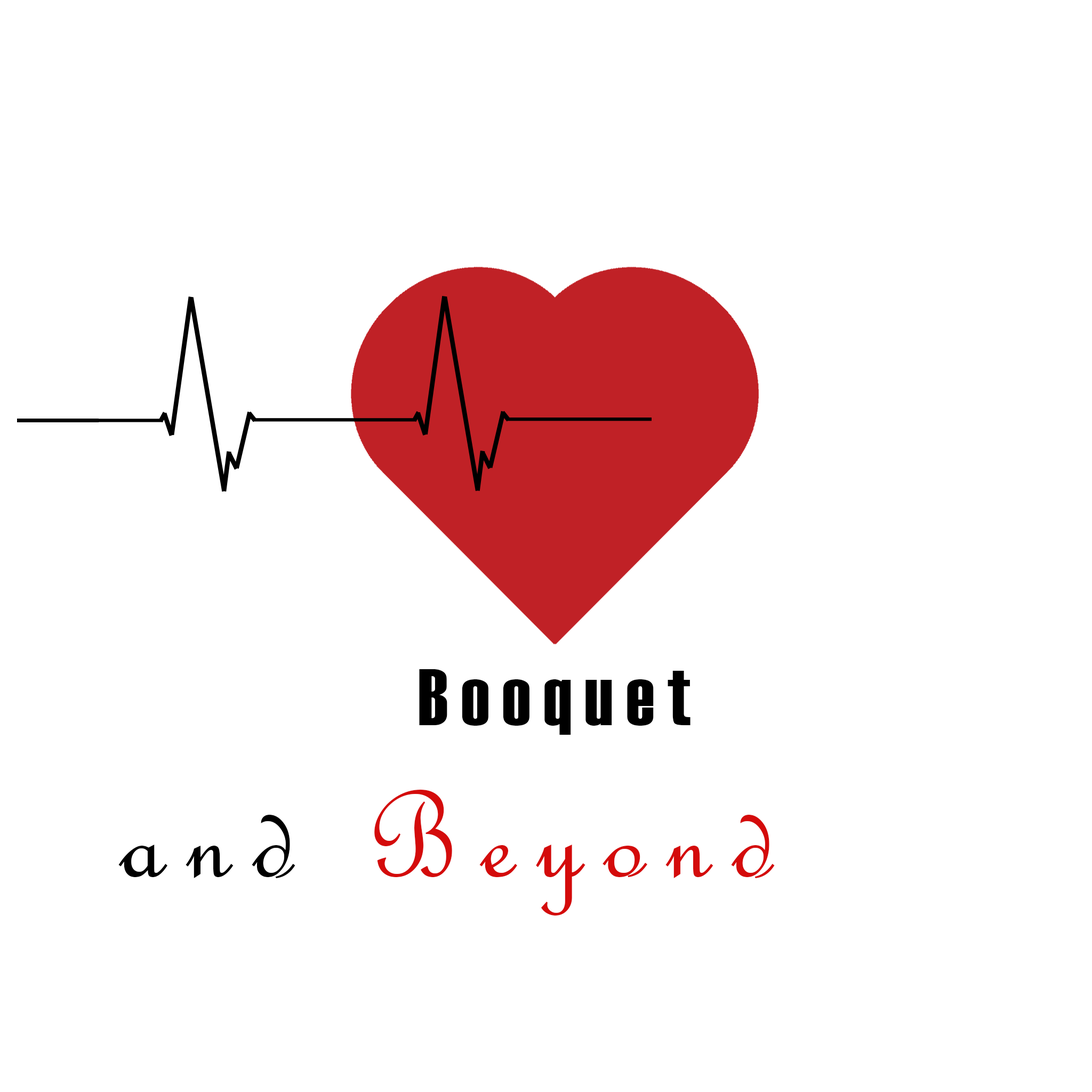
<style>
.page{position:relative;width:1092px;height:1092px;background:#ffffff}
.page>*{position:absolute;margin:0}
.t1{font:80px "Haettenschweiler";letter-spacing:0.16em;color:#000000}
.t2{font:133.3px "FrenchScriptMT";letter-spacing:0.16em;color:#d40b0b}
.t3{font:133.3px "FrenchScriptMT";letter-spacing:0.16em;color:#000000}
</style>
<div class="page">
<p class="t1" style="left:419px;top:669px;width:271px;height:66px">Booquet</p>
<p class="t2" style="left:118px;top:790px;width:657px;height:125px"><span class="t3">and </span>Beyond</p>
</div>
